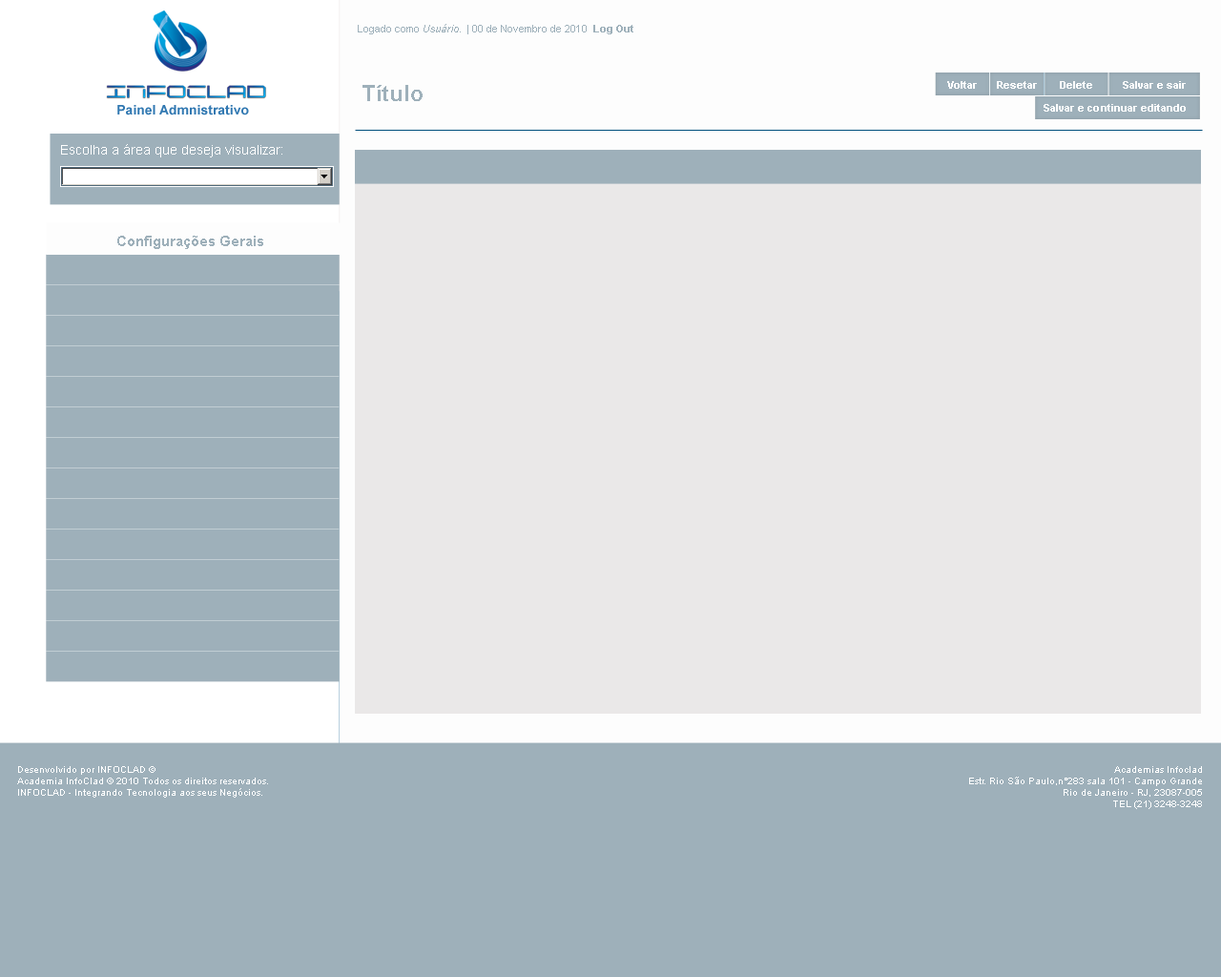
<style>
.page{position:relative;width:1221px;height:977px;background:#eae8e8}
.page>*{position:absolute;margin:0}
.t1{font:10.5px "ArialMT";color:#9eb0ba}
.t2{font:10.5px "Arial-ItalicMT";color:#9eb0ba}
.t3{font:10.5px "Arial-BoldMT";color:#9eb0ba}
.t4{font:21.9px "Arial-BoldMT";color:#9eb0ba}
.t5{font:10.5px "Arial-BoldMT";color:#ffffff}
.t6{font:13.4px "Arial-BoldMT";color:#3279b2}
.t7{font:13.4px "ArialMT";color:#ffffff}
.t8{font:14.3px "Arial-BoldMT";color:#9eb0ba}
.t9{font:9.5px "ArialMT";color:#ffffff}
</style>
<div class="page">
<p class="t1" style="left:358px;top:24px;width:275px;height:10px">Logado como <span class="t2">Usuário</span>.  | 00 de Novembro de 2010  <span class="t3">Log Out</span></p>
<p class="t4" style="left:362px;top:85px;width:61px;height:16px">Título</p>
<p class="t5" style="left:947px;top:81px;width:30px;height:8px">Voltar</p>
<p class="t5" style="left:997px;top:81px;width:40px;height:8px">Resetar</p>
<p class="t5" style="left:1060px;top:81px;width:32px;height:8px">Delete</p>
<p class="t5" style="left:1123px;top:81px;width:63px;height:8px">Salvar e sair</p>
<p class="t6" style="left:117px;top:105px;width:132px;height:10px">Painel Admnistrativo</p>
<p class="t5" style="left:1043px;top:104px;width:143px;height:8px">Salvar e continuar editando</p>
<p class="t7" style="left:61px;top:144px;width:221px;height:13px">Escolha a área que deseja visualizar:</p>
<p class="t8" style="left:117px;top:236px;width:146px;height:13px">Configurações Gerais</p>
<p class="t9" style="left:17px;top:766px;width:251px;height:31px">Desenvolvido por INFOCLAD ©<br>Academia InfoClad © 2010 Todos os direitos reservados.<br>INFOCLAD - Integrando Tecnologia aos seus Negócios.</p>
<p class="t9" style="left:969px;top:766px;width:233px;height:43px;text-align:right">Academias Infoclad<br>Estr. Rio São Paulo,n°283 sala 101 - Campo Grande<br>Rio de Janeiro - RJ, 23087-005<br>TEL (21) 3248-3248</p>
</div>
